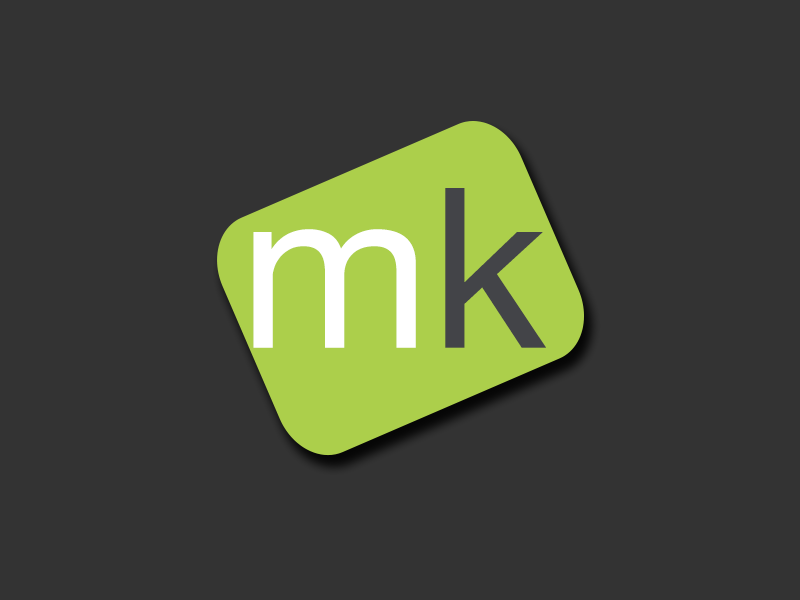
<style>
.page{position:relative;width:800px;height:600px;background:#333333}
.page>*{position:absolute;margin:0}
.t1{font:223.5px "HelveticaNeue";color:#ffffff}
.t2{font:223.5px "HelveticaNeue";color:#434448}
</style>
<div class="page">
<p class="t1" style="left:253px;top:188px;width:293px;height:160px">m<span class="t2">k</span></p>
</div>
